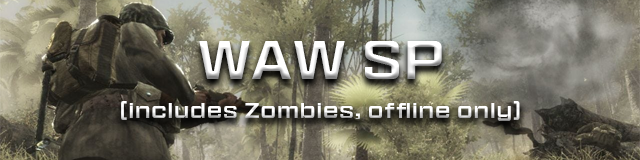
<style>
.page{position:relative;width:640px;height:160px}
.page>*{position:absolute;margin:0}
.t1{font:50px "HitmarkerNormal-Regular";letter-spacing:0.12em;color:#ffffff}
.t2{font:20px "HitmarkerNormal-Regular";letter-spacing:0.12em}
</style>
<div class="page">
<p class="t1" style="left:199px;top:41px;width:243px;height:38px">WAW SP</p>
<p class="t2" style="left:121px;top:101px;width:399px;height:20px">(includes Zombies, offline only)</p>
</div>
